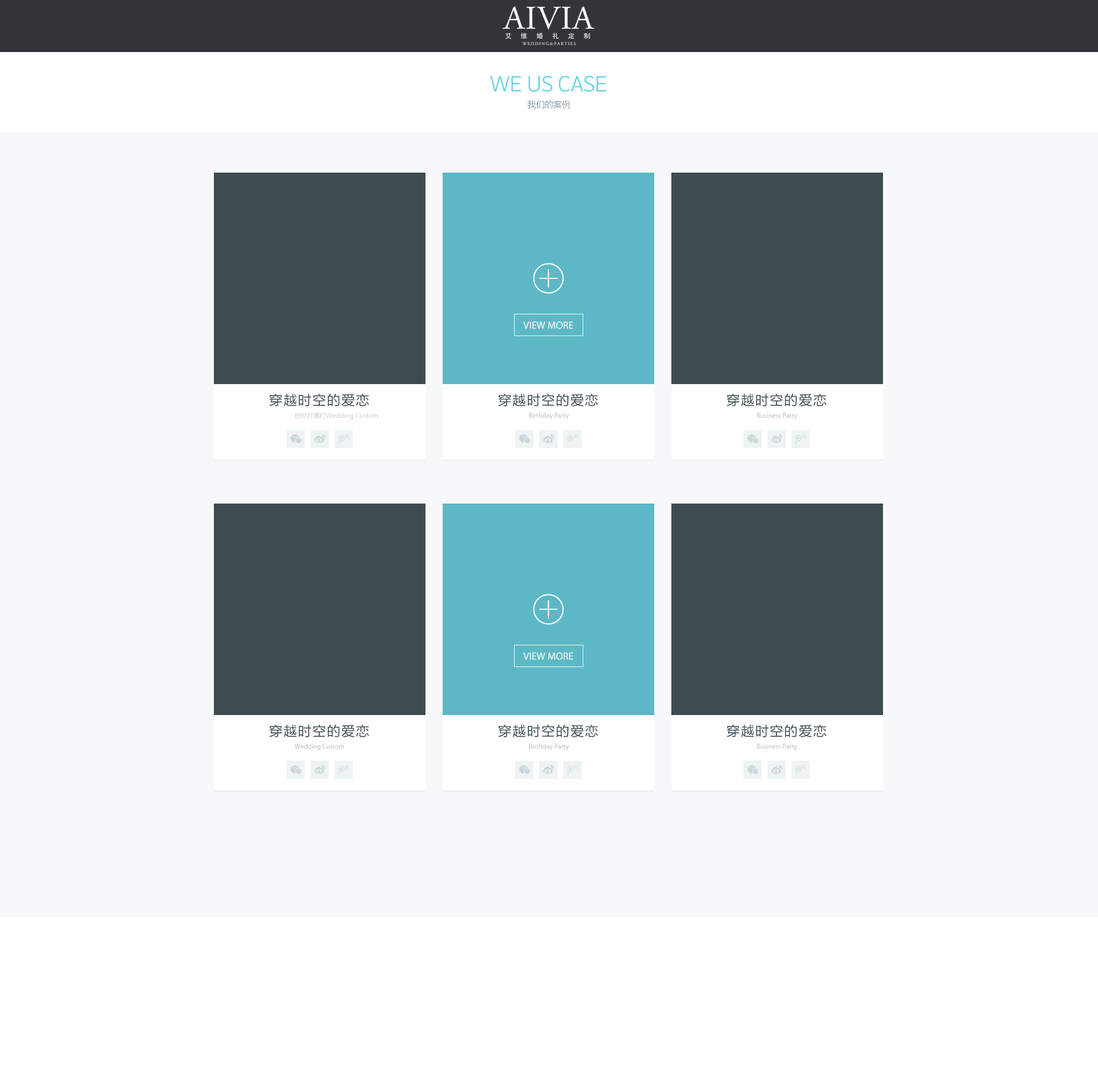
<style>
.page{position:relative;width:1098px;height:1086px;background:#f6f8f9}
.page>*{position:absolute;margin:0}
.t1{font:20.6px "STHeitiSC-Light";color:#65d3e3}
.t2{font:8.6px "MicrosoftYaHei";color:#8c9dac}
.t3{font:10.3px "MyriadPro-Regular";color:#ffffff}
.t4{font:13.1px "MicrosoftYaHei";letter-spacing:0.1em;color:#3d4c51}
.t5{font:6.3px "MicrosoftYaHei";color:#cccccc}
.t6{font:6.9px "MyriadPro-Regular";color:#cccccc}
</style>
<div class="page">
<p class="t1" style="left:490px;top:75px;width:116px;height:17px">WE US CASE</p>
<p class="t2" style="left:527px;top:100px;width:43px;height:9px">我们的案例</p>
<p class="t3" style="left:523px;top:321px;width:50px;height:8px">VIEW MORE</p>
<p class="t4" style="left:269px;top:393px;width:100px;height:13px">穿越时空的爱恋</p>
<p class="t4" style="left:498px;top:393px;width:100px;height:13px">穿越时空的爱恋</p>
<p class="t4" style="left:726px;top:393px;width:100px;height:13px">穿越时空的爱恋</p>
<p class="t5" style="left:294px;top:412px;width:84px;height:8px;opacity:0.8">按时打算打Wedding Custom</p>
<p class="t6" style="left:529px;top:413px;width:40px;height:7px">Birthday Party</p>
<p class="t6" style="left:756px;top:413px;width:41px;height:7px">Business Party</p>
</div>
